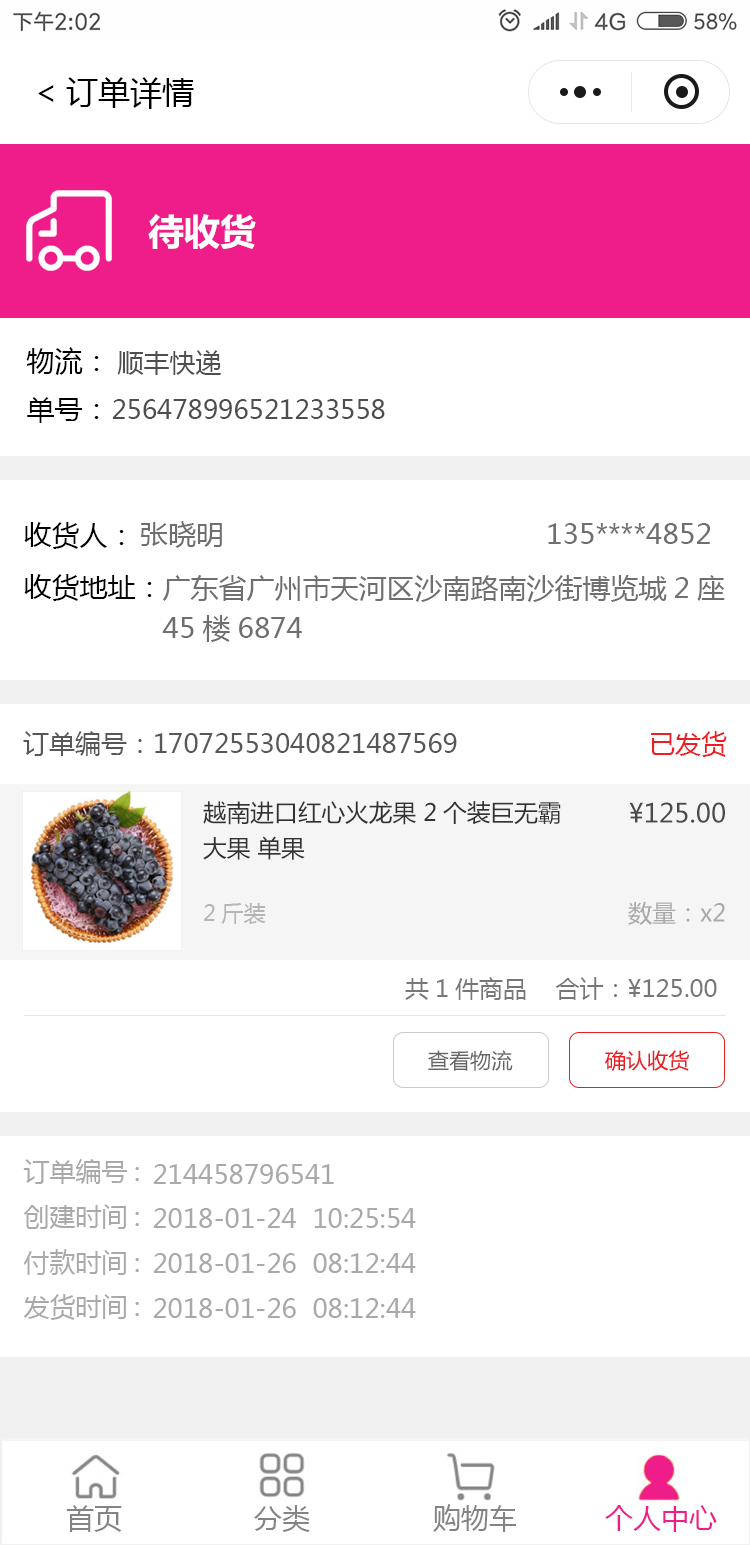
<style>
.page{position:relative;width:750px;height:1545px;background:#ffffff}
.page>*{position:absolute;margin:0}
.t1{font:32px "MicrosoftYaHei";color:#000000}
.t2{font:36px "MicrosoftYaHei-Bold";color:#ffffff}
.t3{font:28px "MicrosoftYaHei";color:#000000}
.t4{font:26px "MicrosoftYaHei";color:#4e4e4e}
.t5{font:28px "MicrosoftYaHei";color:#6f6f6f}
.t6{font:28px/40px "MicrosoftYaHei";color:#6f6f6f}
.t7{font:26px "MicrosoftYaHei";color:#575757}
.t8{font:26px "MicrosoftYaHei";color:#eb1e24}
.t9{font:23.7px/35.5px "MicrosoftYaHei";color:#333233}
.t10{font:26px "MicrosoftYaHei";color:#4a4a4a}
.t11{font:22px "MicrosoftYaHei";color:#b5b5b5}
.t12{font:24px "MicrosoftYaHei";color:#aaa9a9}
.t13{font:24px "MicrosoftYaHei";color:#777777}
.t14{font:21px "MicrosoftYaHei";color:#666666}
.t15{font:21px "MicrosoftYaHei";color:#eb1e24}
.t16{font:26px "MicrosoftYaHei";color:#aaa9a9}
</style>
<div class="page">
<p class="t1" style="left:38px;top:77px;width:156px;height:32px">&lt;订单详情</p>
<p class="t2" style="left:148px;top:214px;width:108px;height:36px">待收货</p>
<p class="t3" style="left:26px;top:347px;width:73px;height:28px">物流：</p>
<p class="t4" style="left:117px;top:350px;width:105px;height:25px">顺丰快递</p>
<p class="t3" style="left:27px;top:397px;width:72px;height:26px">单号：</p>
<p class="t4" style="left:112px;top:399px;width:273px;height:20px">256478996521233558</p>
<p class="t5" style="left:141px;top:521px;width:81px;height:27px">张晓明</p>
<p class="t3" style="left:24px;top:522px;width:100px;height:27px">收货人：</p>
<p class="t5" style="left:548px;top:523px;width:162px;height:21px">135****4852</p>
<p class="t3" style="left:24px;top:574px;width:128px;height:27px">收货地址：</p>
<p class="t6" style="left:162px;top:575px;width:563px;height:67px">广东省广州市天河区沙南路南沙街博览城2座<br>45楼6874</p>
<p class="t7" style="left:23px;top:731px;width:434px;height:25px">订单编号：17072553040821487569</p>
<p class="t8" style="left:651px;top:731px;width:76px;height:26px">已发货</p>
<p class="t9" style="left:203px;top:801px;width:358px;height:59px">越南进口红心火龙果 2个装巨无霸大果 单果</p>
<p class="t10" style="left:629px;top:802px;width:96px;height:21px">¥125.00</p>
<p class="t11" style="left:204px;top:903px;width:62px;height:21px">2斤装</p>
<p class="t12" style="left:628px;top:901px;width:97px;height:24px">数量：x2</p>
<p class="t13" style="left:405px;top:977px;width:312px;height:23px">共1件商品    合计：¥125.00</p>
<p class="t14" style="left:428px;top:1050px;width:85px;height:21px">查看物流</p>
<p class="t15" style="left:605px;top:1050px;width:84px;height:21px">确认收货</p>
<p class="t16" style="left:23px;top:1159px;width:116px;height:25px">订单编号:</p>
<p class="t16" style="left:153px;top:1164px;width:181px;height:20px">214458796541</p>
<p class="t16" style="left:23px;top:1204px;width:116px;height:25px">创建时间:</p>
<p class="t16" style="left:153px;top:1208px;width:263px;height:20px">2018-01-24  10:25:54</p>
<p class="t16" style="left:24px;top:1249px;width:115px;height:26px">付款时间:</p>
<p class="t16" style="left:153px;top:1253px;width:263px;height:20px">2018-01-26  08:12:44</p>
<p class="t16" style="left:23px;top:1294px;width:116px;height:26px">发货时间:</p>
<p class="t16" style="left:153px;top:1298px;width:263px;height:20px">2018-01-26  08:12:44</p>
</div>
